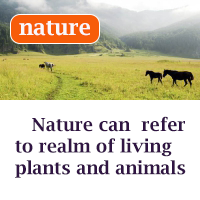
<style>
.page{position:relative;width:200px;height:200px;background:#ffffff}
.page>*{position:absolute;margin:0}
.t1{font:22px "LucidaBright-Demi";color:#f9f8fa}
.t2{font:18px "LucidaBright-Demi";color:#301543}
</style>
<div class="page">
<p class="t1" style="left:19px;top:20px;width:71px;height:16px">nature</p>
<p class="t2" style="left:15px;top:116px;width:171px;height:62px">Nature can  refer<br>to realm of living <br>plants and animals</p>
</div>
